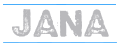
<style>
.page{position:relative;width:120px;height:50px;background:#ffffff}
.page>*{position:absolute;margin:0}
.t1{font:33.4px "BLACKNAPKINSPersonalUse";color:#b9b9bc}
</style>
<div class="page">
<p class="t1" style="left:12px;top:9px;width:97px;height:28px">JANA</p>
</div>
